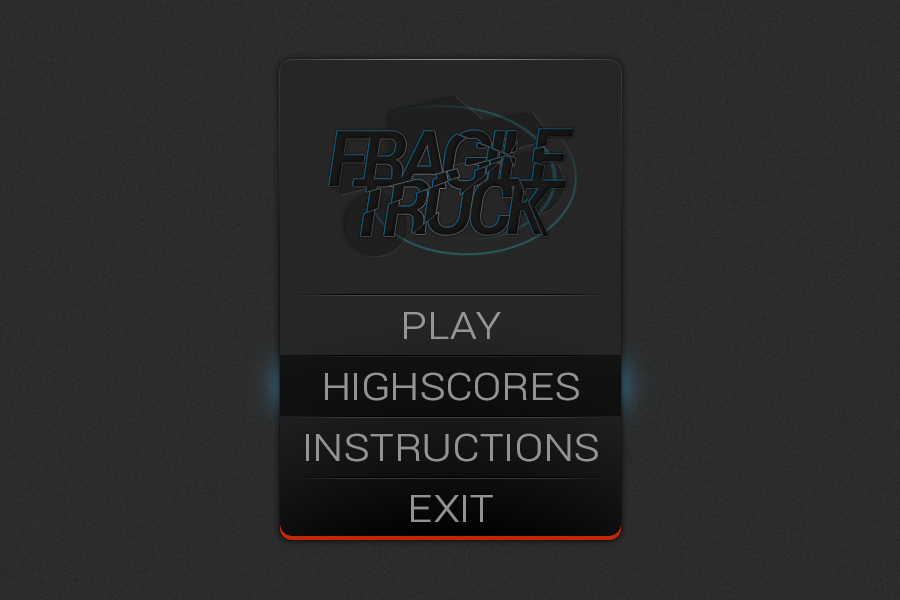
<style>
.page{position:relative;width:900px;height:600px}
.page>*{position:absolute;margin:0}
.t1{font:47.6px "Roboto-Light";letter-spacing:-0.02em;color:#959595;font-variant:small-caps;scale:1.05 1}
.t2{font:47.6px "Roboto-Light";letter-spacing:-0.02em;color:#939393;font-variant:small-caps;scale:1.05 1}
.t3{font:47.6px "Roboto-Light";letter-spacing:-0.02em;color:#929292;font-variant:small-caps;scale:1.05 1}
</style>
<div class="page">
<p class="t1" style="left:404px;top:312px;width:97px;height:27px">PLAY</p>
<p class="t2" style="left:325px;top:372px;width:254px;height:29px">HIGHSCORES</p>
<p class="t2" style="left:306px;top:433px;width:292px;height:29px">INSTRUCTIONS</p>
<p class="t3" style="left:411px;top:495px;width:82px;height:27px">EXIT</p>
</div>
